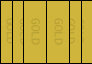
<style>
.page{position:relative;width:92px;height:64px;background:#cfb53b}
.page>*{position:absolute;margin:0}
.t1{font:12px "Consolas";color:#b8a135}
</style>
<div class="page">
<p class="t1" style="left:31px;top:18px;width:9px;height:27px;rotate:90deg">GOLD</p>
<p class="t1" style="left:54px;top:18px;width:9px;height:27px;rotate:90deg">GOLD</p>
</div>
